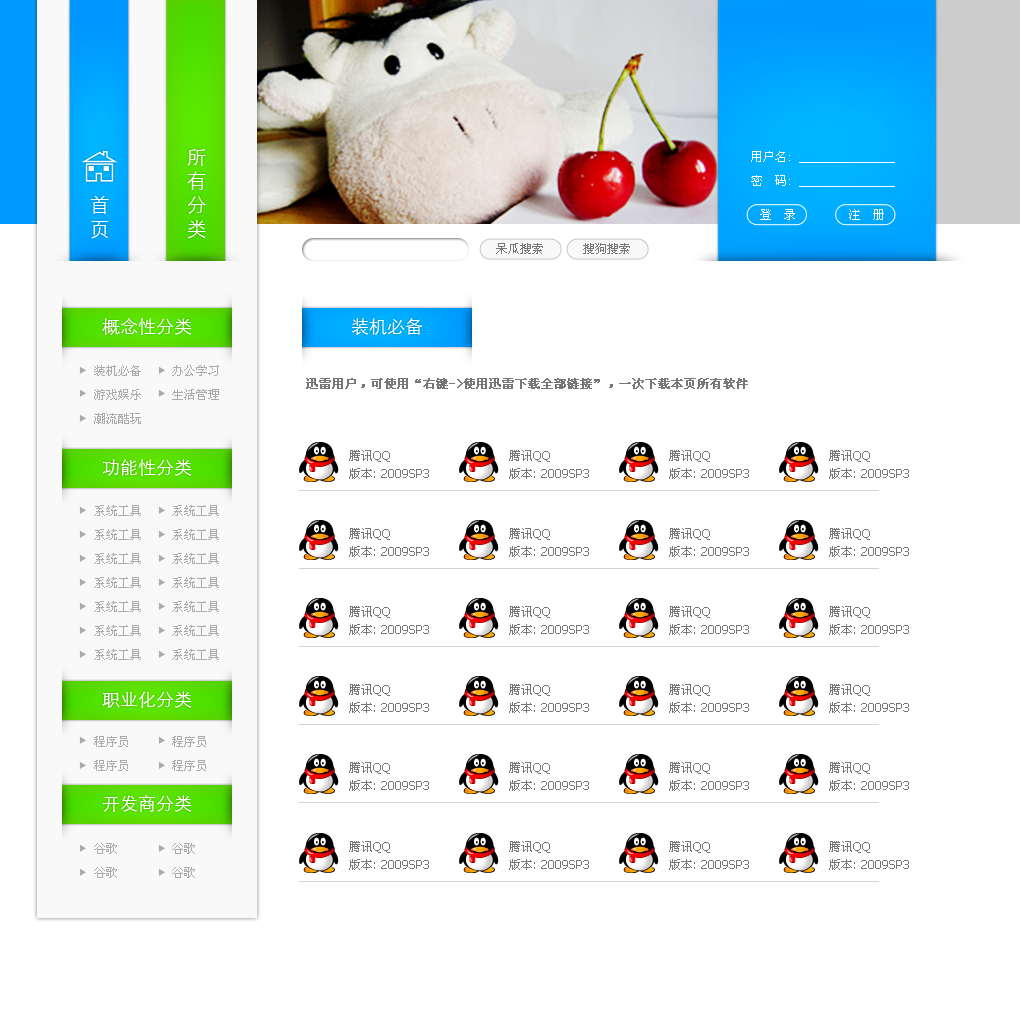
<style>
.page{position:relative;width:1020px;height:1020px;background:#ffffff}
.page>*{position:absolute;margin:0}
.t1{font:20px/24px "STXihei";color:#ffffff}
.t2{font:12px/24px "SimSun";color:#ffffff}
.t3{font:12px "SimSun";color:#ffffff}
.t4{font:12px "SimSun";color:#fefefe}
.t5{font:12px "SimSun";color:#777777}
.t6{font:18px "STXihei";color:#ffffff}
.t7{font:12px/24px "SimSun";color:#ababab}
.t8{font:12px "SimSun";color:#777777;font-weight:bold}
.t9{font:12px/18px "Tahoma";color:#777777}
.t10{font:12px/18px "SimSun";color:#777777}
</style>
<div class="page">
<p class="t1" style="left:187px;top:148px;width:19px;height:91px;text-align:center">所<br>有<br>分<br>类</p>
<p class="t2" style="left:751px;top:151px;width:144px;height:36px">用户名: ________________<br>密  码: ________________</p>
<p class="t1" style="left:90px;top:195px;width:19px;height:44px;text-align:center">首<br>页</p>
<p class="t3" style="left:760px;top:209px;width:35px;height:11px">登  录</p>
<p class="t4" style="left:849px;top:209px;width:35px;height:11px">注  册</p>
<p class="t5" style="left:496px;top:243px;width:47px;height:11px">呆瓜搜索</p>
<p class="t5" style="left:583px;top:243px;width:47px;height:11px">搜狗搜索</p>
<p class="t6" style="left:102px;top:318px;width:90px;height:17px">概念性分类</p>
<p class="t6" style="left:351px;top:318px;width:72px;height:17px">装机必备</p>
<p class="t7" style="left:94px;top:365px;width:125px;height:59px;text-align:center">装机必备     办公学习<br>游戏娱乐     生活管理<br>潮流酷玩</p>
<p class="t8" style="left:306px;top:378px;width:442px;height:11px">迅雷用户，可使用“右键-&gt;使用迅雷下载全部链接”，一次下载本页所有软件</p>
<p class="t6" style="left:102px;top:459px;width:90px;height:17px">功能性分类</p>
<p class="t9" style="left:349px;top:450px;width:80px;height:29px"><span class="t10">腾讯</span>QQ<br><span class="t10">版本</span>: 2009SP3</p>
<p class="t9" style="left:509px;top:450px;width:80px;height:29px"><span class="t10">腾讯</span>QQ<br><span class="t10">版本</span>: 2009SP3</p>
<p class="t9" style="left:669px;top:450px;width:80px;height:29px"><span class="t10">腾讯</span>QQ<br><span class="t10">版本</span>: 2009SP3</p>
<p class="t9" style="left:829px;top:450px;width:80px;height:29px"><span class="t10">腾讯</span>QQ<br><span class="t10">版本</span>: 2009SP3</p>
<p class="t7" style="left:94px;top:505px;width:125px;height:155px;text-align:center">系统工具     系统工具<br>系统工具     系统工具<br>系统工具     系统工具<br>系统工具     系统工具<br>系统工具     系统工具<br>系统工具     系统工具<br>系统工具     系统工具</p>
<p class="t9" style="left:349px;top:528px;width:80px;height:29px"><span class="t10">腾讯</span>QQ<br><span class="t10">版本</span>: 2009SP3</p>
<p class="t9" style="left:509px;top:528px;width:80px;height:29px"><span class="t10">腾讯</span>QQ<br><span class="t10">版本</span>: 2009SP3</p>
<p class="t9" style="left:669px;top:528px;width:80px;height:29px"><span class="t10">腾讯</span>QQ<br><span class="t10">版本</span>: 2009SP3</p>
<p class="t9" style="left:829px;top:528px;width:80px;height:29px"><span class="t10">腾讯</span>QQ<br><span class="t10">版本</span>: 2009SP3</p>
<p class="t9" style="left:349px;top:606px;width:80px;height:29px"><span class="t10">腾讯</span>QQ<br><span class="t10">版本</span>: 2009SP3</p>
<p class="t9" style="left:509px;top:606px;width:80px;height:29px"><span class="t10">腾讯</span>QQ<br><span class="t10">版本</span>: 2009SP3</p>
<p class="t9" style="left:669px;top:606px;width:80px;height:29px"><span class="t10">腾讯</span>QQ<br><span class="t10">版本</span>: 2009SP3</p>
<p class="t9" style="left:829px;top:606px;width:80px;height:29px"><span class="t10">腾讯</span>QQ<br><span class="t10">版本</span>: 2009SP3</p>
<p class="t9" style="left:349px;top:684px;width:80px;height:29px"><span class="t10">腾讯</span>QQ<br><span class="t10">版本</span>: 2009SP3</p>
<p class="t9" style="left:509px;top:684px;width:80px;height:29px"><span class="t10">腾讯</span>QQ<br><span class="t10">版本</span>: 2009SP3</p>
<p class="t9" style="left:669px;top:684px;width:80px;height:29px"><span class="t10">腾讯</span>QQ<br><span class="t10">版本</span>: 2009SP3</p>
<p class="t9" style="left:829px;top:684px;width:80px;height:29px"><span class="t10">腾讯</span>QQ<br><span class="t10">版本</span>: 2009SP3</p>
<p class="t6" style="left:102px;top:691px;width:90px;height:17px">职业化分类</p>
<p class="t7" style="left:94px;top:736px;width:112px;height:35px;text-align:center">程序员       程序员  <br>程序员       程序员</p>
<p class="t9" style="left:349px;top:762px;width:80px;height:29px"><span class="t10">腾讯</span>QQ<br><span class="t10">版本</span>: 2009SP3</p>
<p class="t9" style="left:509px;top:762px;width:80px;height:29px"><span class="t10">腾讯</span>QQ<br><span class="t10">版本</span>: 2009SP3</p>
<p class="t9" style="left:669px;top:762px;width:80px;height:29px"><span class="t10">腾讯</span>QQ<br><span class="t10">版本</span>: 2009SP3</p>
<p class="t9" style="left:829px;top:762px;width:80px;height:29px"><span class="t10">腾讯</span>QQ<br><span class="t10">版本</span>: 2009SP3</p>
<p class="t6" style="left:102px;top:795px;width:90px;height:17px">开发商分类</p>
<p class="t7" style="left:94px;top:843px;width:101px;height:35px;text-align:center">谷歌         谷歌    <br>谷歌         谷歌</p>
<p class="t9" style="left:349px;top:841px;width:80px;height:29px"><span class="t10">腾讯</span>QQ<br><span class="t10">版本</span>: 2009SP3</p>
<p class="t9" style="left:509px;top:841px;width:80px;height:29px"><span class="t10">腾讯</span>QQ<br><span class="t10">版本</span>: 2009SP3</p>
<p class="t9" style="left:669px;top:841px;width:80px;height:29px"><span class="t10">腾讯</span>QQ<br><span class="t10">版本</span>: 2009SP3</p>
<p class="t9" style="left:829px;top:841px;width:80px;height:29px"><span class="t10">腾讯</span>QQ<br><span class="t10">版本</span>: 2009SP3</p>
</div>
